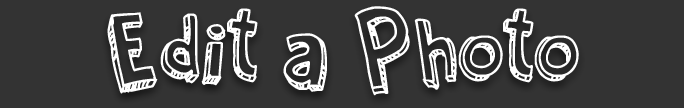
<style>
.page{position:relative;width:684px;height:108px;background:#333333}
.page>*{position:absolute;margin:0}
.t1{font:100px "CartoonRelief";color:#ffffff}
</style>
<div class="page">
<p class="t1" style="left:107px;top:6px;width:472px;height:90px">Edit a Photo</p>
</div>
